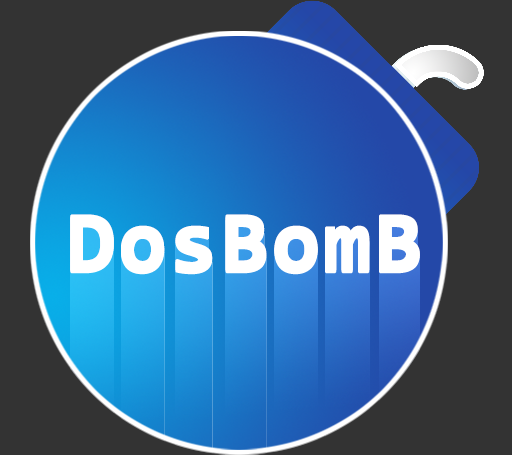
<style>
.page{position:relative;width:512px;height:455px;background:#333333}
.page>*{position:absolute;margin:0}
.t1{font:85px "Consolas-Bold";letter-spacing:0.025em;color:#ffffff;font-weight:bold}
</style>
<div class="page">
<p class="t1" style="left:70px;top:214px;width:350px;height:59px">DosBomB</p>
</div>
